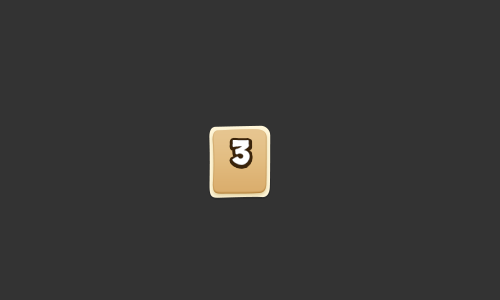
<style>
.page{position:relative;width:500px;height:300px;background:#333333}
.page>*{position:absolute;margin:0}
.t1{font:33px "Skranji-Bold";letter-spacing:0.02em;color:#ffffff;scale:0.96 1}
</style>
<div class="page">
<p class="t1" style="left:232px;top:140px;width:18px;height:25px">3</p>
</div>
